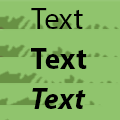
<style>
.page{position:relative;width:120px;height:120px;background:#90c46d}
.page>*{position:absolute;margin:0}
.t1{font:30px "MyriadPro-Regular";color:#000000}
.t2{font:30px "MyriadPro-Bold";color:#000000}
.t3{font:30px "MyriadPro-BoldIt";color:#000000}
</style>
<div class="page">
<p class="t1" style="left:31px;top:8px;width:52px;height:21px">Text</p>
<p class="t2" style="left:31px;top:48px;width:56px;height:21px">Text</p>
<p class="t3" style="left:32px;top:88px;width:54px;height:21px">Text</p>
</div>
